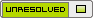
<style>
.page{position:relative;width:93px;height:18px;background:#b5d800}
.page>*{position:absolute;margin:0}
.t1{font:8px "BitDustTwo";color:#000000}
</style>
<div class="page">
<p class="t1" style="left:6px;top:7px;width:59px;height:5px">UNRESOLVED</p>
</div>
